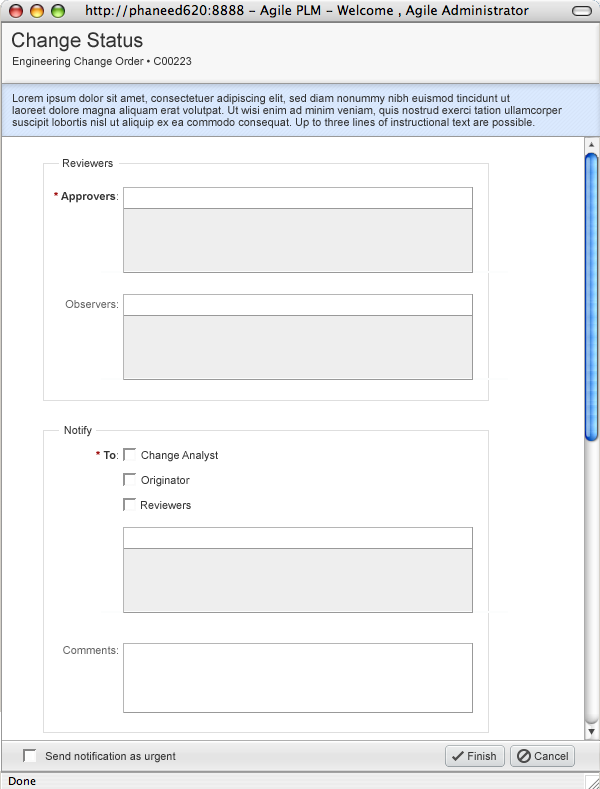
<style>
.page{position:relative;width:600px;height:789px;background:#ffffff}
.page>*{position:absolute;margin:0}
.t1{font:20px "ArialMT";color:#333333}
.t2{font:11px "ArialMT";color:#333333}
.t3{font:11px/12px "ArialMT";color:#333333}
.t4{font:11px "Arial-BoldMT";color:#333333}
.t5{font:11px "Arial-BoldMT";color:#990000}
.t6{font:11px "ArialMT";color:#656565}
</style>
<div class="page">
<p class="t1" style="left:12px;top:32px;width:131px;height:20px">Change Status</p>
<p class="t2" style="left:13px;top:57px;width:179px;height:11px">Engineering Change Order • C00223</p>
<p class="t3" style="left:12px;top:94px;width:550px;height:35px">Lorem ipsum dolor sit amet, consectetuer adipiscing elit, sed diam nonummy nibh euismod tincidunt ut <br>laoreet dolore magna aliquam erat volutpat. Ut wisi enim ad minim veniam, quis nostrud exerci tation ullamcorper <br>suscipit lobortis nisl ut aliquip ex ea commodo consequat. Up to three lines of instructional text are possible.</p>
<p class="t2" style="left:63px;top:159px;width:50px;height:8px">Reviewers</p>
<p class="t4" style="left:54px;top:192px;width:64px;height:11px"><span class="t5">*</span> Approvers<span class="t6">:</span></p>
<p class="t6" style="left:65px;top:300px;width:53px;height:8px">Observers:</p>
<p class="t2" style="left:64px;top:426px;width:28px;height:11px">Notify</p>
<p class="t4" style="left:96px;top:451px;width:22px;height:8px"><span class="t5">*</span> To<span class="t6">:</span></p>
<p class="t2" style="left:141px;top:451px;width:77px;height:11px">Change Analyst</p>
<p class="t2" style="left:141px;top:476px;width:49px;height:11px">Originator</p>
<p class="t2" style="left:141px;top:501px;width:50px;height:8px">Reviewers</p>
<p class="t6" style="left:63px;top:646px;width:55px;height:8px">Comments:</p>
<p class="t2" style="left:45px;top:752px;width:131px;height:11px">Send notification as urgent</p>
<p class="t2" style="left:468px;top:752px;width:28px;height:8px">Finish</p>
<p class="t2" style="left:534px;top:752px;width:34px;height:8px">Cancel</p>
</div>
